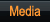
<style>
.page{position:relative;width:50px;height:22px}
.page>*{position:absolute;margin:0}
.t1{font:14px "ArialNarrow";color:#ff9933}
</style>
<div class="page">
<p class="t1" style="left:10px;top:5px;width:31px;height:12px">Media</p>
</div>
